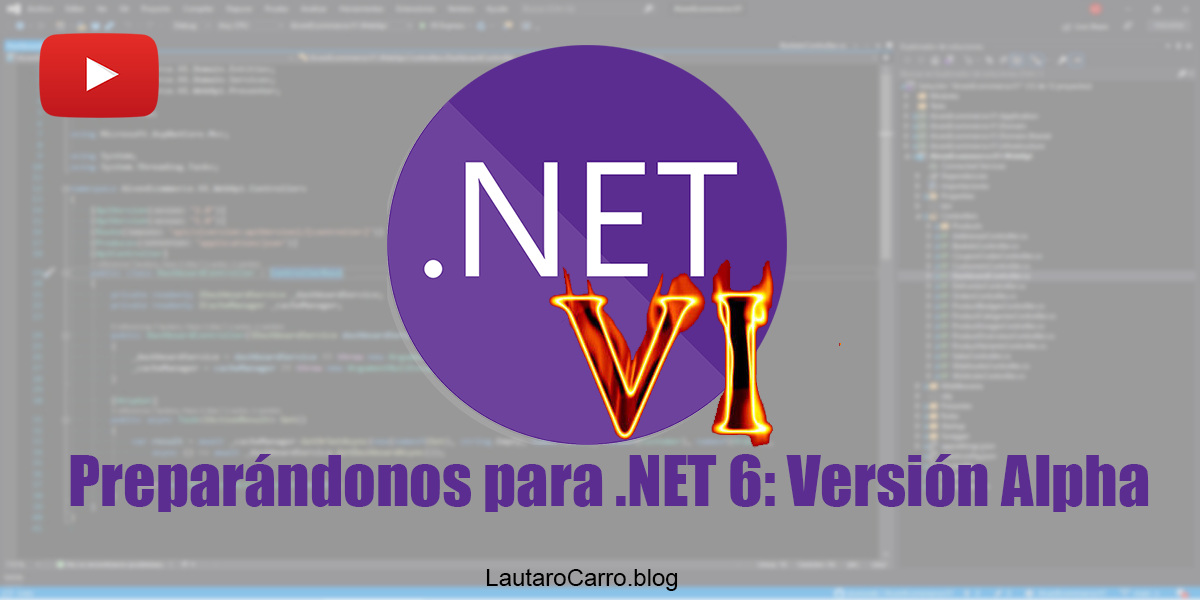
<style>
.page{position:relative;width:1200px;height:600px;background:#989898}
.page>*{position:absolute;margin:0}
.t1{font:64px "Impact";color:#5c2d91}
.t2{font:24px "ArialMT";color:#000000}
</style>
<div class="page">
<p class="t1" style="left:70px;top:454px;width:1079px;height:58px">Preparándonos para .NET 6: Versión Alpha</p>
<p class="t2" style="left:486px;top:568px;width:192px;height:23px">LautaroCarro.blog</p>
</div>
